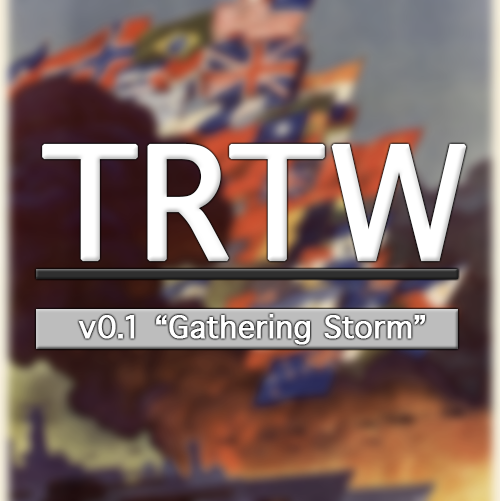
<style>
.page{position:relative;width:500px;height:501px}
.page>*{position:absolute;margin:0}
.t1{font:150px "Geneva";color:#ffffff;font-weight:bold}
.t2{font:30px "Geneva";color:#ffffff;font-weight:bold}
</style>
<div class="page">
<p class="t1" style="left:42px;top:143px;width:425px;height:119px">TRTW</p>
<p class="t2" style="left:78px;top:314px;width:347px;height:31px">v0.1 “Gathering Storm”</p>
</div>
